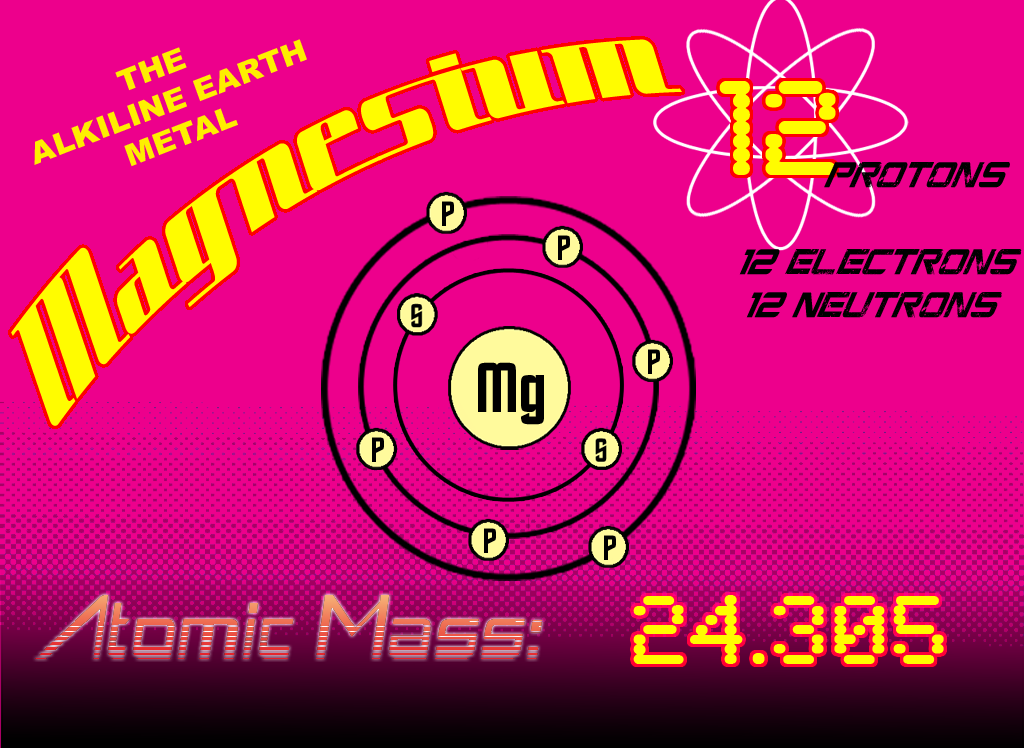
<style>
.page{position:relative;width:1024px;height:748px;background:#ed008c}
.page>*{position:absolute;margin:0}
.t1{font:137.4px "SpaceCadetNF";color:#fffc00;scale:0.84 1}
.t2{font:30px "Arial-Black";color:#feef00;scale:1.04 1}
.t3{font:140px "SynchroLET";color:#fffc00}
.t4{font:39.4px "CGFLocustResistance";color:#000000;scale:0.67 1}
.t5{font:63.1px "Roddenberry";color:#000000;scale:1.07 1}
.t6{font:100px "SynchroLET";color:#fffc00}
</style>
<div class="page">
<p class="t1" style="left:11px;top:39px;width:671px;height:387px;rotate:-28deg">Magnesium</p>
<p class="t2" style="left:34px;top:39px;width:273px;height:128px;text-align:center;rotate:-21deg">THE <br>ALKILINE EARTH<br>METAL</p>
<p class="t3" style="left:719px;top:81px;width:117px;height:94px">12</p>
<p class="t4" style="left:739px;top:162px;width:283px;height:156px;text-align:center">ProtonS<br><br>12  electrons<br>    12  Neutrons</p>
<p class="t5" style="left:478px;top:362px;width:66px;height:63px">Mg</p>
<p class="t6" style="left:633px;top:595px;width:311px;height:69px">24.305</p>
</div>
